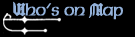
<style>
.page{position:relative;width:135px;height:37px;background:#000000}
.page>*{position:absolute;margin:0}
.t1{font:18px "Celtic-CondensedNormal";color:#94b2da}
.t2{font:18px "CathedralExtendedNormal";color:#94b2da}
.t3{font:18px "CathedralNormal";color:#94b2da}
</style>
<div class="page">
<p class="t1" style="left:13px;top:1px;width:110px;height:19px"><span class="t2">W</span>ho’s on <span class="t3">M</span>ap</p>
</div>
